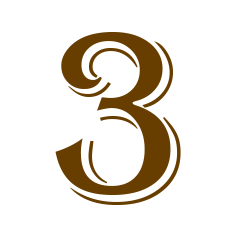
<style>
.page{position:relative;width:240px;height:240px;background:#ffffff}
.page>*{position:absolute;margin:0}
.t1{font:250px "Algerian";color:#683e00}
</style>
<div class="page">
<p class="t1" style="left:55px;top:32px;width:126px;height:173px">3</p>
</div>
